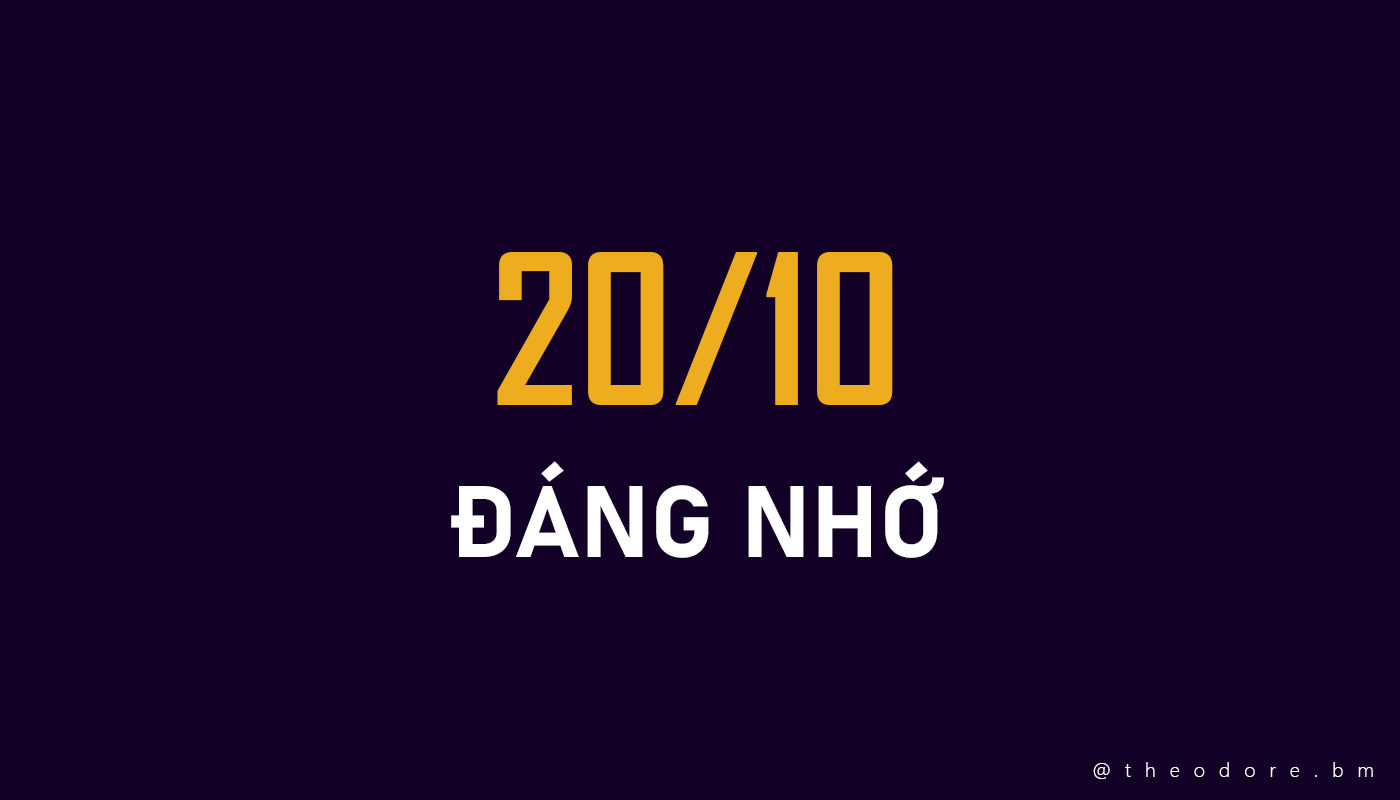
<style>
.page{position:relative;width:1400px;height:800px;background:#120026}
.page>*{position:absolute;margin:0}
.t1{font:200px "SVN-AgencyFBbold";color:#eead1f}
.t2{font:100px "Bahnschrift-Bold";color:#ffffff}
.t3{font:20px "SegoeUI-Light";letter-spacing:0.7em;color:#ffffff}
</style>
<div class="page">
<p class="t1" style="left:497px;top:252px;width:396px;height:153px">20/10</p>
<p class="t2" style="left:451px;top:461px;width:493px;height:97px">ĐÁNG NHỚ</p>
<p class="t3" style="left:1093px;top:762px;width:280px;height:17px">@theodore.bm</p>
</div>
